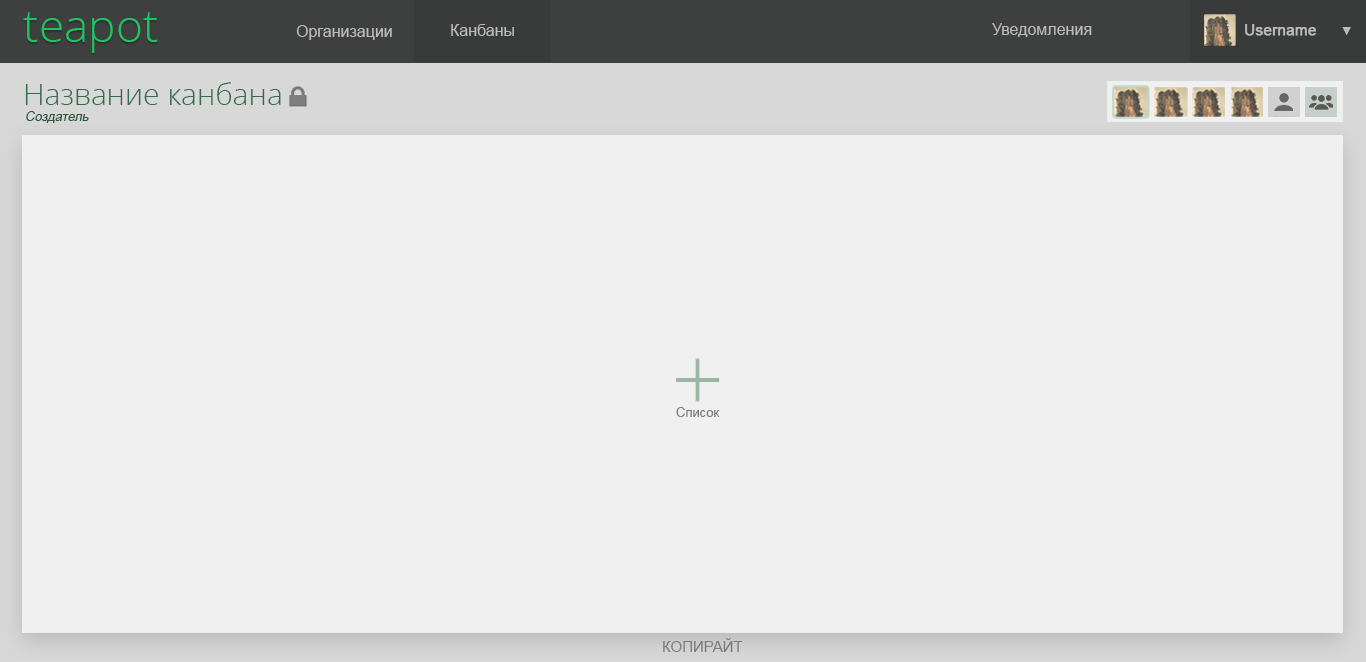
<style>
.page{position:relative;width:1366px;height:662px;background:#f0f0f0}
.page>*{position:absolute;margin:0}
.t1{font:46px "OpenSans-Light";color:#1dc45f}
.t2{font:16px "ArialMT";color:#bdbbbb}
.t3{font:15px "ArialMT";color:#bdbbbb;font-weight:bold}
.t4{font:12.3px "ArialMT";color:#bdbbbb}
.t5{font:30px "OpenSans-Light";color:#336d4a}
.t6{font:13px "ArialMT";color:#2c583d;font-style:italic}
.t7{font:93px "OpenSans-Light";color:#9db5a6}
.t8{font:13px "ArialMT";color:#7c7c7c}
.t9{font:15px "ArialMT";color:#7b7a7a}
</style>
<div class="page">
<p class="t1" style="left:23px;top:12px;width:135px;height:41px">teapot</p>
<p class="t2" style="left:296px;top:25px;width:96px;height:15px">Организации</p>
<p class="t2" style="left:451px;top:24px;width:63px;height:12px">Канбаны</p>
<p class="t2" style="left:992px;top:23px;width:100px;height:14px">Уведомления</p>
<p class="t3" style="left:1245px;top:24px;width:71px;height:12px">Username</p>
<p class="t4" style="left:1342px;top:27px;width:9px;height:8px">▼</p>
<p class="t5" style="left:25px;top:82px;width:256px;height:23px">Название канбана</p>
<p class="t6" style="left:26px;top:111px;width:63px;height:12px">Создатель</p>
<p class="t7" style="left:676px;top:358px;width:44px;height:44px">+</p>
<p class="t8" style="left:676px;top:407px;width:44px;height:10px">Список</p>
<p class="t9" style="left:663px;top:638px;width:80px;height:14px">КОПИРАЙТ</p>
</div>
